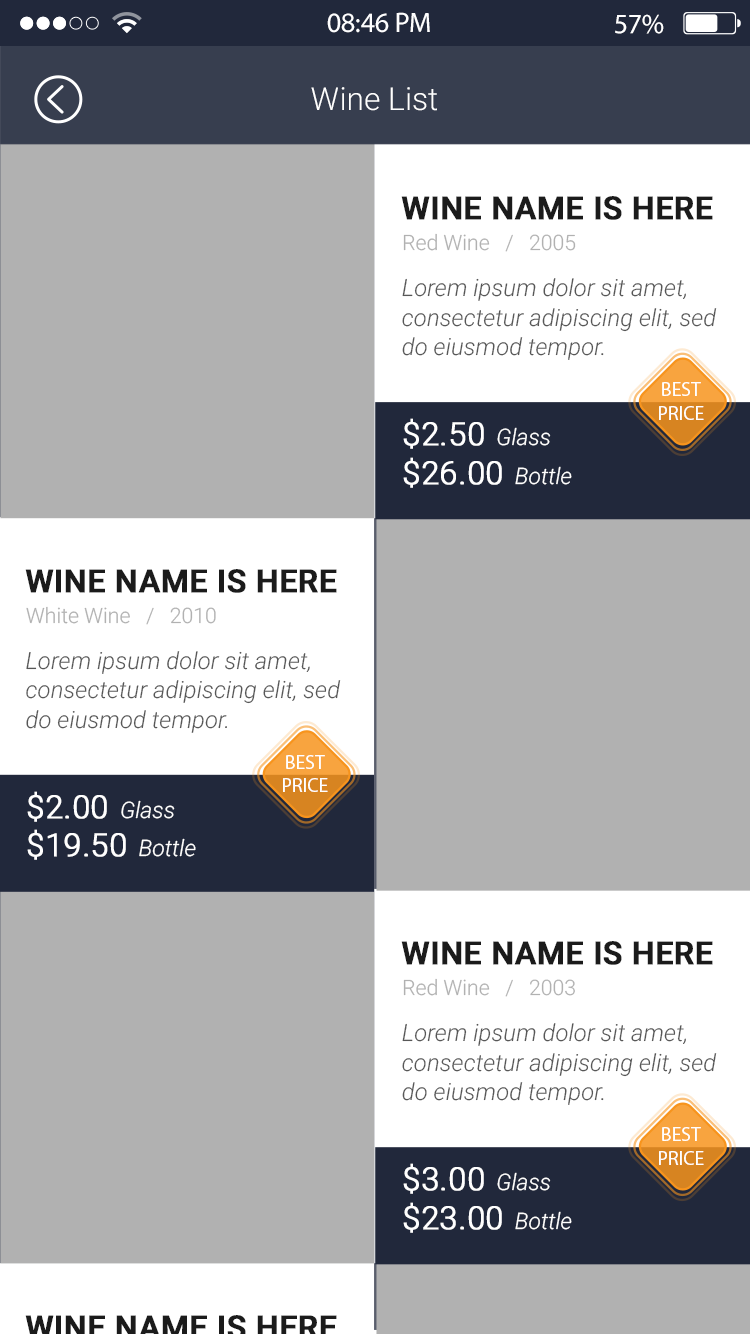
<style>
.page{position:relative;width:750px;height:1334px;background:#b1b1b1}
.page>*{position:absolute;margin:0}
.t1{font:28.1px "MyriadPro-Regular";color:#fefeff}
.t2{font:28.1px "MyriadPro-Regular";color:#ffffff}
.t3{font:31.9px "Roboto-Light";color:#ffffff}
.t4{font:31.8px "Roboto-Medium";color:#1b1b1b;text-transform:uppercase;font-weight:bold}
.t5{font:21.2px "Roboto-Light";color:#b1b1b1}
.t6{font:23.9px/29.5px "Roboto-LightItalic";color:#575757}
.t7{font:19.6px "MyriadHebrew-Regular";color:#ffffff;text-transform:uppercase}
.t8{font:32px "Roboto-Light";color:#ffffff;font-weight:bold}
.t9{font:22.9px "Roboto-LightItalic";color:#ffffff}
.t10{font:23.8px/29.5px "Roboto-LightItalic";color:#575757}
.t11{font:22.8px "Roboto-LightItalic";color:#ffffff}
</style>
<div class="page">
<p class="t1" style="left:327px;top:12px;width:103px;height:21px">08:46 PM</p>
<p class="t2" style="left:615px;top:14px;width:49px;height:20px">57%</p>
<p class="t3" style="left:311px;top:87px;width:126px;height:24px">Wine List</p>
<p class="t4" style="left:401px;top:196px;width:312px;height:24px">Wine Name is Here</p>
<p class="t5" style="left:403px;top:233px;width:173px;height:19px">Red Wine   /   2005</p>
<p class="t6" style="left:402px;top:278px;width:315px;height:82px">Lorem ipsum dolor sit amet, consectetur adipiscing elit, sed do eiusmod tempor.</p>
<p class="t7" style="left:659px;top:382px;width:45px;height:38px;text-align:center">best<br>Price</p>
<p class="t8" style="left:403px;top:418px;width:148px;height:31px">$2.50<span class="t9">  Glass</span></p>
<p class="t8" style="left:403px;top:457px;width:169px;height:31px">$26.00<span class="t9">  Bottle</span></p>
<p class="t4" style="left:25px;top:569px;width:312px;height:24px">Wine Name is Here</p>
<p class="t5" style="left:26px;top:606px;width:190px;height:19px">White Wine   /   2010</p>
<p class="t10" style="left:26px;top:651px;width:315px;height:82px">Lorem ipsum dolor sit amet, consectetur adipiscing elit, sed do eiusmod tempor.</p>
<p class="t7" style="left:283px;top:755px;width:45px;height:37px;text-align:center">best<br>Price</p>
<p class="t8" style="left:27px;top:791px;width:148px;height:31px">$2.00<span class="t11">  Glass</span></p>
<p class="t8" style="left:27px;top:829px;width:169px;height:31px">$19.50<span class="t11">  Bottle</span></p>
<p class="t4" style="left:401px;top:941px;width:312px;height:24px">Wine Name is Here</p>
<p class="t5" style="left:403px;top:978px;width:172px;height:19px">Red Wine   /   2003</p>
<p class="t6" style="left:402px;top:1023px;width:315px;height:82px">Lorem ipsum dolor sit amet, consectetur adipiscing elit, sed do eiusmod tempor.</p>
<p class="t7" style="left:659px;top:1127px;width:45px;height:38px;text-align:center">best<br>Price</p>
<p class="t8" style="left:403px;top:1163px;width:148px;height:31px">$3.00<span class="t9">  Glass</span></p>
<p class="t8" style="left:403px;top:1202px;width:169px;height:31px">$23.00<span class="t9">  Bottle</span></p>
</div>
